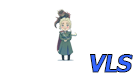
<style>
.page{position:relative;width:135px;height:75px;background:#ffffff}
.page>*{position:absolute;margin:0}
.t1{font:24px "Tahoma-Bold";letter-spacing:-0.065em;font-weight:bold;font-style:italic}
</style>
<div class="page">
<p class="t1" style="left:90px;top:54px;width:43px;height:19px">VLS</p>
</div>
